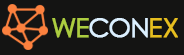
<style>
.page{position:relative;width:184px;height:55px;background:#141413}
.page>*{position:absolute;margin:0}
.t1{font:26.2px "CenturyGothic";letter-spacing:-0.07em;color:#dcf0ff;font-weight:bold}
.t2{font:26.2px "CenturyGothic";letter-spacing:-0.07em;color:#accd40;font-weight:bold}
.t3{font:26.2px "CenturyGothic";letter-spacing:-0.01em;color:#e6be1f;font-weight:bold}
</style>
<div class="page">
<p class="t1" style="left:52px;top:18px;width:96px;height:20px"><span class="t2">WE</span>CON</p>
<p class="t3" style="left:150px;top:18px;width:28px;height:20px">EX</p>
</div>
